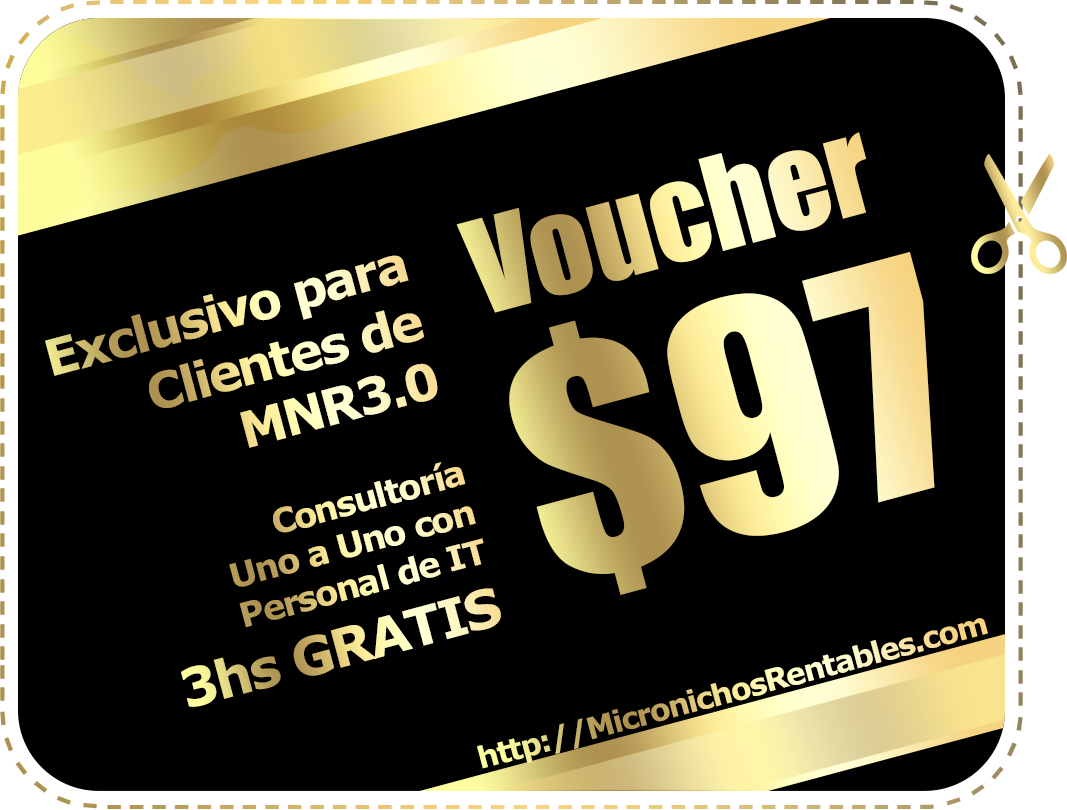
<style>
.page{position:relative;width:1067px;height:810px;background:#000000}
.page>*{position:absolute;margin:0}
.t1{font:120px "Impact"}
.t2{font:50px "Verdana-Bold";letter-spacing:-0.05em}
.t3{font:295.6px "Impact"}
.t4{font:33.8px "Verdana-Bold";letter-spacing:-0.05em}
.t5{font:53.2px "Verdana-Bold";letter-spacing:-0.05em}
</style>
<div class="page">
<p class="t1" style="left:456px;top:132px;width:411px;height:181px;rotate:-15deg">Voucher</p>
<p class="t2" style="left:45px;top:255px;width:393px;height:193px;text-align:right;rotate:-15deg">Exclusivo para<br>Clientes de<br>MNR3.0</p>
<p class="t3" style="left:509px;top:252px;width:426px;height:343px;rotate:-15deg">$97</p>
<p class="t4" style="left:181px;top:462px;width:320px;height:245px;text-align:right;rotate:-15deg">Consultoría<br>Uno a Uno con <br>Personal de IT<br><span class="t5">3hs GRATIS</span></p>
</div>
